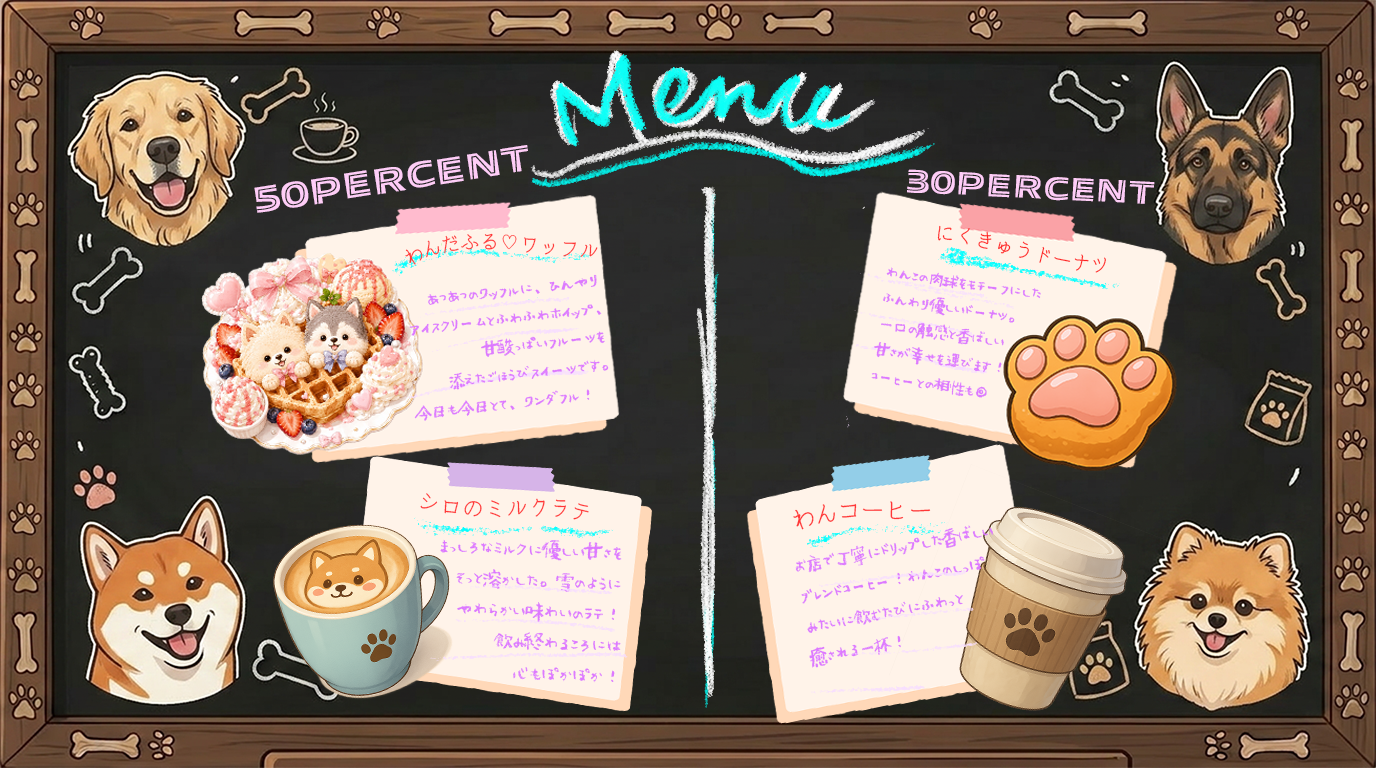
<style>
.page{position:relative;width:1376px;height:768px}
.page>*{position:absolute;margin:0}
.t1{font:36.5px "AllumiStdExtendedInline-Black24A";color:#fecdf7}
.t2{font:32.4px "AllumiStdExtendedInline-Black24A";color:#fecdf7}
.t3{font:24px "irohamaru-mikami-Light";color:#ff3737;font-variant:small-caps}
.t4{font:19.6px "irohamaru-mikami-Light";color:#ff2323}
.t5{font:15px "Nagurigaki-Crayon";color:#dd79ff}
.t6{font:16.1px "Nagurigaki-Crayon";color:#dd79ff}
.t7{font:12.6px "irohamaru-mikami-Light";color:#ff3737;font-variant:small-caps}
.t8{font:17.6px "Nagurigaki-Crayon";color:#dd79ff;scale:0.91 1}
.t9{font:17.7px "Nagurigaki-Crayon";color:#dd79ff}
</style>
<div class="page">
<p class="t1" style="left:254px;top:145px;width:274px;height:68px;rotate:-9deg">50PERCENT</p>
<p class="t2" style="left:907px;top:169px;width:248px;height:35px;rotate:3deg">30PERCENT</p>
<p class="t3" style="left:405px;top:233px;width:193px;height:32px;rotate:-2deg">わんだふる♡ワッフル</p>
<p class="t4" style="left:937px;top:225px;width:169px;height:48px;rotate:9deg">にくきゅうドーナツ</p>
<p class="t5" style="left:871px;top:267px;width:170px;height:131px;rotate:8deg">わんこの肉球をモチーフにした<br>ふんわり優しいドーナツ。<br>一口の触感と香ばしい<br>甘さが幸せを運びます！<br>コーヒーとの相性も◎<br>♡</p>
<p class="t6" style="left:409px;top:274px;width:200px;height:147px;text-align:right;rotate:-6deg">あつあつのワッフルに、ひんやり<br>アイスクリームとふわふわホイップ、<br>甘酸っぱいフルーツを<br>添えたごほうびスイーツです。<br>今日も今日とて、ワンダフル！♡</p>
<p class="t7" style="left:420px;top:493px;width:169px;height:27px;rotate:1deg">シロのミルクラテ</p>
<p class="t7" style="left:793px;top:501px;width:138px;height:29px;rotate:-4deg">わんコーヒー</p>
<p class="t8" style="left:795px;top:525px;width:198px;height:143px;rotate:-11deg">お店で丁寧にドリップした香ばしい<br>ブレンドコーヒー！わんこのしっぽ<br>みたいに飲むたびにふわっと<br>癒される一杯！</p>
<p class="t9" style="left:440px;top:539px;width:182px;height:144px;text-align:right;rotate:2deg">まっしろなミルクに優しい甘さを<br>そっと溶かした。雪のように<br>やわらかい味わいのラテ！<br>飲み終わるころには<br>心もぽかぽか！<br>♡</p>
</div>
